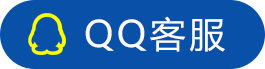
<style>
.page{position:relative;width:265px;height:69px;background:#0950a8}
.page>*{position:absolute;margin:0}
.t1{font:35.9px "MicrosoftYaHei";letter-spacing:0.1em;color:#ffffff}
</style>
<div class="page">
<p class="t1" style="left:85px;top:16px;width:140px;height:36px">QQ客服</p>
</div>
